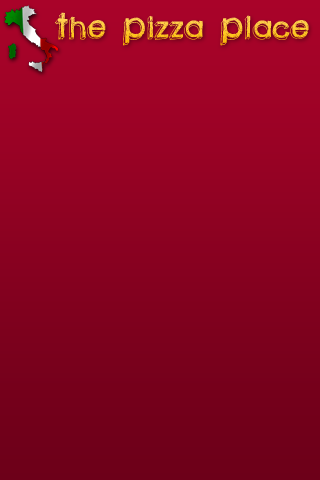
<style>
.page{position:relative;width:320px;height:480px}
.page>*{position:absolute;margin:0}
.t1{font:50px "Greenpiloww"}
</style>
<div class="page">
<p class="t1" style="left:55px;top:12px;width:254px;height:34px">The Pizza Place</p>
</div>
